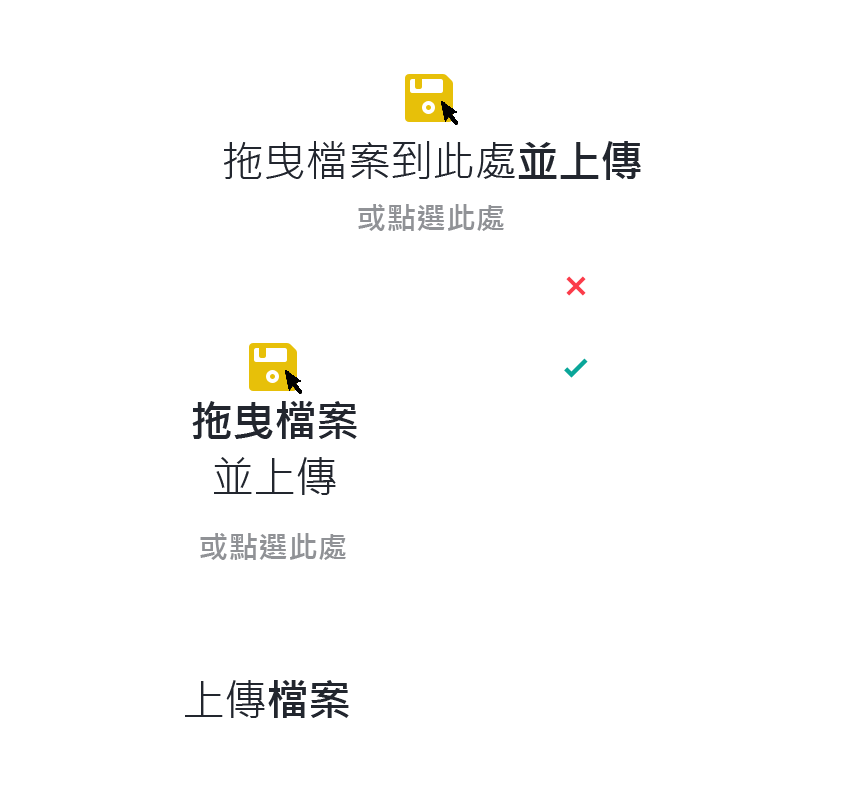
<style>
.page{position:relative;width:856px;height:812px;background:#ffffff}
.page>*{position:absolute;margin:0}
.t1{font:42.6px "MicrosoftJhengHeiRegular";letter-spacing:-0.01em;color:#22262e}
.t2{font:42.6px "MicrosoftJhengHeiBold";letter-spacing:-0.01em;color:#22262e}
.t3{font:30px "MicrosoftJhengHeiBold";letter-spacing:-0.01em;color:#909296}
.t4{font:42.6px/56.2px "MicrosoftJhengHeiBold";letter-spacing:-0.01em;color:#22262e}
.t5{font:42.6px/56.2px "MicrosoftJhengHeiRegular";letter-spacing:-0.01em;color:#22262e}
</style>
<div class="page">
<p class="t1" style="left:224px;top:141px;width:417px;height:39px">拖曳檔案到此處<span class="t2">並上傳</span></p>
<p class="t3" style="left:358px;top:204px;width:146px;height:27px">或點選此處</p>
<p class="t4" style="left:192px;top:401px;width:165px;height:94px;text-align:center">拖曳檔案<br><span class="t5">並上傳</span></p>
<p class="t3" style="left:200px;top:533px;width:146px;height:27px">或點選此處</p>
<p class="t1" style="left:185px;top:680px;width:164px;height:38px">上傳<span class="t2">檔案</span></p>
</div>
